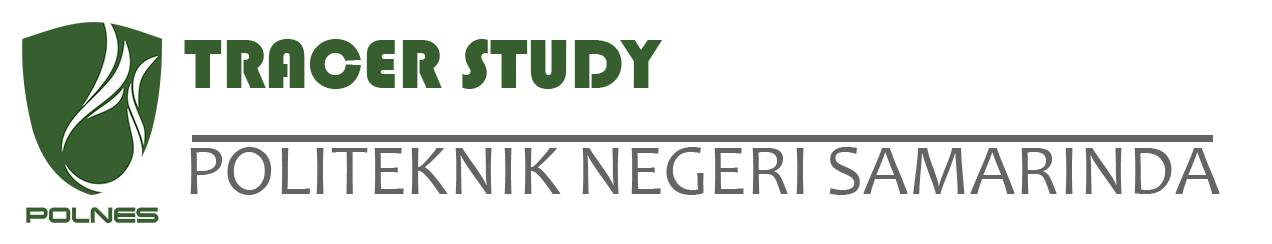
<style>
.page{position:relative;width:1272px;height:244px;background:#ffffff}
.page>*{position:absolute;margin:0}
.t1{font:72px "Bauhaus93";color:#375e2f}
.t2{font:72px "Candara";color:#646464}
</style>
<div class="page">
<p class="t1" style="left:184px;top:39px;width:478px;height:50px">TRACER STUDY</p>
<p class="t2" style="left:190px;top:147px;width:1030px;height:48px">POLITEKNIK NEGERI SAMARINDA</p>
</div>
